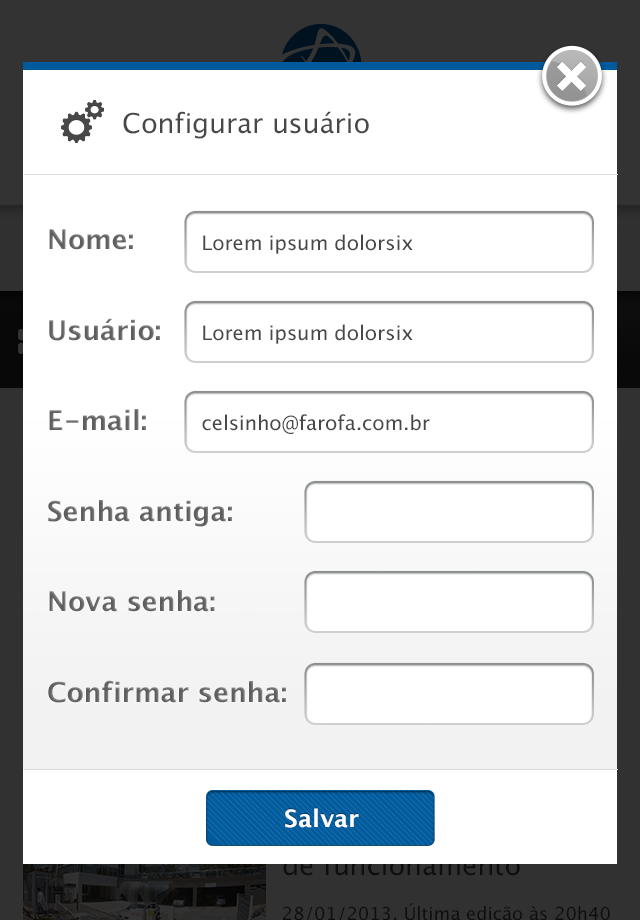
<style>
.page{position:relative;width:640px;height:920px;background:#ffffff}
.page>*{position:absolute;margin:0}
.t1{font:27.2px "LucidaGrande";color:#484848}
.t2{font:27.2px/45.3px "LucidaGrande-Bold";color:#5d5d5d}
.t3{font:19.9px "LucidaGrande";color:#484848}
.t4{font:24px "LucidaGrande-Bold";color:#ffffff}
</style>
<div class="page">
<p class="t1" style="left:123px;top:111px;width:246px;height:28px">Configurar usuário</p>
<p class="t2" style="left:48px;top:229px;width:238px;height:474px">Nome:<br><br>Usuário:<br><br>E-mail:<br><br>Senha antiga:<br><br>Nova senha:<br><br>Confirmar senha:</p>
<p class="t3" style="left:203px;top:234px;width:210px;height:20px">Lorem ipsum dolorsix</p>
<p class="t3" style="left:203px;top:324px;width:210px;height:20px">Lorem ipsum dolorsix</p>
<p class="t3" style="left:202px;top:414px;width:228px;height:20px">celsinho@farofa.com.br</p>
<p class="t4" style="left:285px;top:808px;width:74px;height:20px">Salvar</p>
</div>
